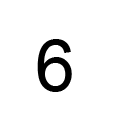
<style>
.page{position:relative;width:128px;height:128px;background:#ffffff}
.page>*{position:absolute;margin:0}
.t1{font:72px "ArialMT";color:#000000}
</style>
<div class="page">
<p class="t1" style="left:37px;top:39px;width:35px;height:53px">6</p>
</div>
